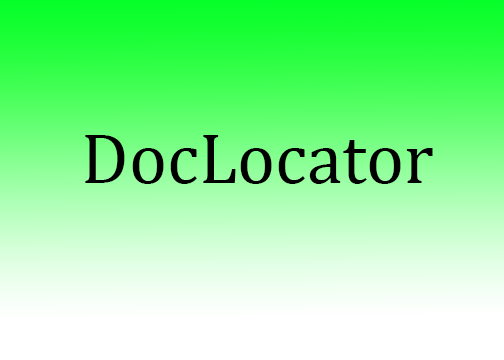
<style>
.page{position:relative;width:504px;height:360px}
.page>*{position:absolute;margin:0}
.t1{font:72px "Cambria";color:#000000}
</style>
<div class="page">
<p class="t1" style="left:85px;top:135px;width:348px;height:49px">DocLocator</p>
</div>
